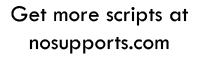
<style>
.page{position:relative;width:200px;height:60px;background:#ffffff}
.page>*{position:absolute;margin:0}
.t1{font:23.3px "TwCenMT-Regular";color:#000000}
</style>
<div class="page">
<p class="t1" style="left:11px;top:5px;width:178px;height:49px;text-align:center">Get more scripts at<br>nosupports.com</p>
</div>
